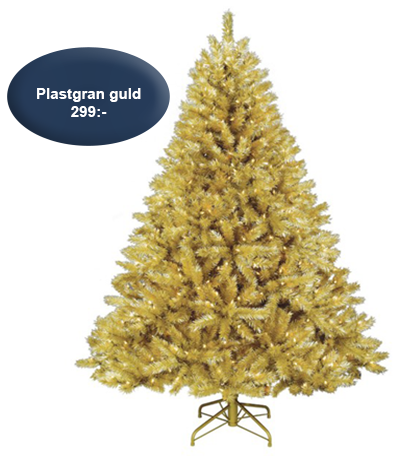
<style>
.page{position:relative;width:399px;height:456px;background:#ffffff}
.page>*{position:absolute;margin:0}
.t1{font:15.1px "Arial-BoldMT";color:#ffffff}
</style>
<div class="page">
<p class="t1" style="left:37px;top:88px;width:104px;height:29px;text-align:center">Plastgran guld<br>299:-</p>
</div>
